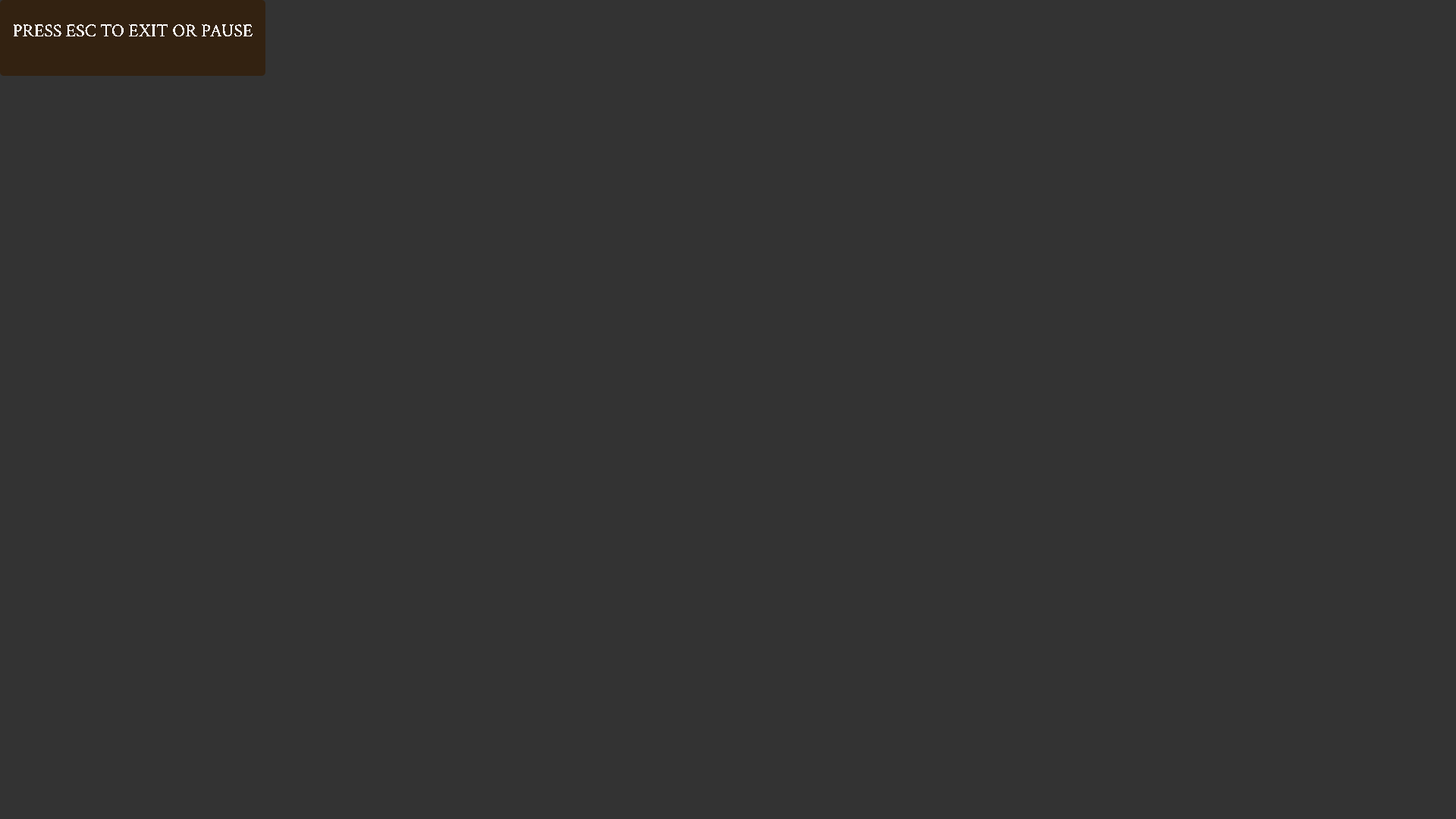
<style>
.page{position:relative;width:1456px;height:819px;background:#333333}
.page>*{position:absolute;margin:0}
.t1{font:18.2px "CrimsonText-Regular";color:#ffffff}
</style>
<div class="page">
<p class="t1" style="left:13px;top:24px;width:240px;height:13px">PRESS ESC TO EXIT OR PAUSE</p>
</div>
